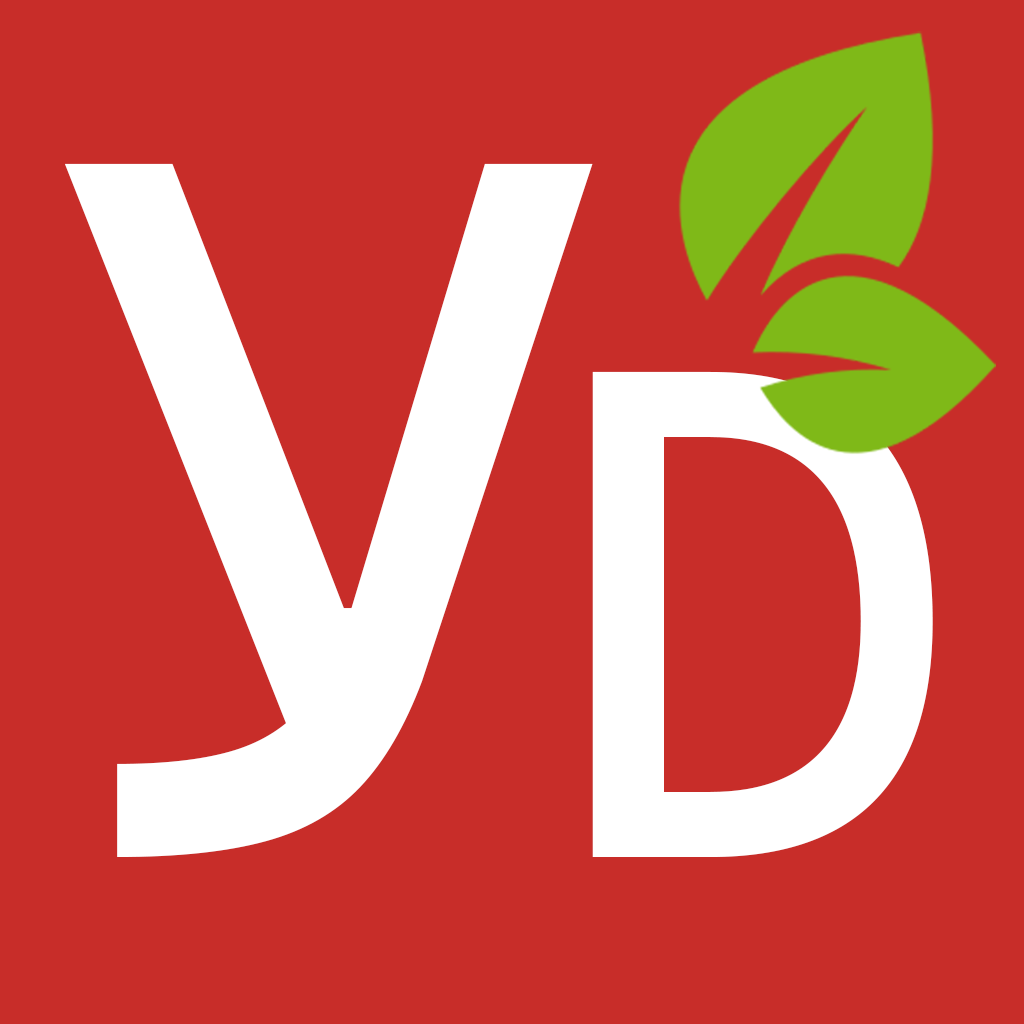
<style>
.page{position:relative;width:1024px;height:1024px;background:#c82d29}
.page>*{position:absolute;margin:0}
.t1{font:1000px "CascadiaCode-Regular";color:#ffffff}
.t2{font:700px "CascadiaCode-Regular";color:#ffffff}
</style>
<div class="page">
<p class="t1" style="left:65px;top:163px;width:528px;height:694px">У</p>
<p class="t2" style="left:592px;top:371px;width:341px;height:486px">D</p>
</div>
